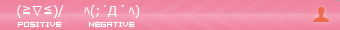
<style>
.page{position:relative;width:340px;height:30px}
.page>*{position:absolute;margin:0}
.t1{font:8px/4px "04b08";color:#ffffff}
.t2{font:12px/4px "Meiryo";color:#ffffff}
</style>
<div class="page">
<p class="t1" style="left:17px;top:5px;width:47px;height:23px;text-align:center"><span class="t2">(≧∇≦)/<br></span><br><br>positive</p>
<p class="t2" style="left:84px;top:5px;width:56px;height:23px;text-align:center">ﾍ(;´Д｀ﾍ)<br><span class="t1"><br><br>negative</span></p>
</div>
